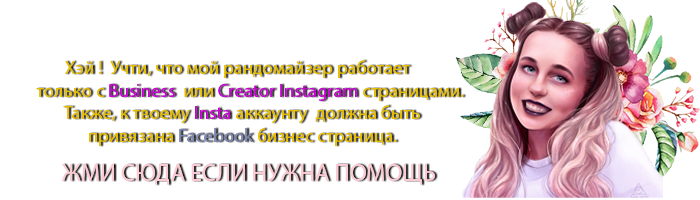
<style>
.page{position:relative;width:700px;height:200px;background:#ffffff}
.page>*{position:absolute;margin:0}
.t1{font:18.8px "MyriadPro-Regular";color:#e7be00}
.t2{font:16.7px "MyriadPro-Regular";color:#e7be00}
.t3{font:18.8px "MyriadPro-Regular";color:#c800d4}
.t4{font:18.8px "MyriadPro-Regular";color:#7c87b1}
.t5{font:24px "MyriadPro-Regular";color:#fccbd3}
</style>
<div class="page">
<p class="t1" style="left:36px;top:60px;width:428px;height:86px"><span class="t2">     </span>Хэй !  Учти, что мой рандомайзер работает <br> только с <span class="t3">Business</span>  или <span class="t3">Creator Instagram </span>страницами.<br>              Также, к твоему <span class="t3">Insta</span> аккаунту  должна быть <br>                    привязана<span class="t4"> Facebook</span> бизнес страница.</p>
<p class="t5" style="left:61px;top:164px;width:374px;height:21px">ЖМИ СЮДА ЕСЛИ НУЖНА ПОМОЩЬ</p>
</div>
